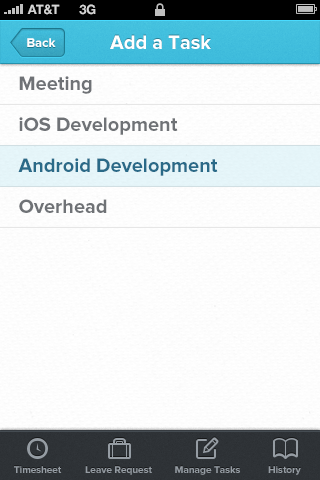
<style>
.page{position:relative;width:320px;height:480px;background:#fdfdfd}
.page>*{position:absolute;margin:0}
.t1{font:13px "HelveticaNeue-Bold";color:#d4d4d4;text-transform:uppercase}
.t2{font:13px "ProximaNova-Bold";color:#ffffff}
.t3{font:20px "ProximaNova-Bold";color:#ffffff}
.t4{font:20px/41px "ProximaNova-Bold";color:#6f7276}
.t5{font:20px/41px "ProximaNova-Bold";color:#2a6a88}
.t6{font:10px "ProximaNova-Bold";color:#959ca3}
</style>
<div class="page">
<p class="t1" style="left:27px;top:4px;width:33px;height:11px">AT&amp;t</p>
<p class="t1" style="left:79px;top:4px;width:17px;height:11px">3G</p>
<p class="t2" style="left:27px;top:38px;width:29px;height:9px">Back</p>
<p class="t3" style="left:110px;top:35px;width:101px;height:14px">Add a Task</p>
<p class="t4" style="left:18px;top:76px;width:200px;height:137px">Meeting<br>iOS Development<br><span class="t5">Android Development<br></span>Overhead</p>
<p class="t6" style="left:14px;top:466px;width:48px;height:7px">Timesheet</p>
<p class="t6" style="left:85px;top:466px;width:67px;height:9px">Leave Request</p>
<p class="t6" style="left:175px;top:466px;width:65px;height:9px">Manage Tasks</p>
<p class="t6" style="left:268px;top:466px;width:33px;height:9px">History</p>
</div>
